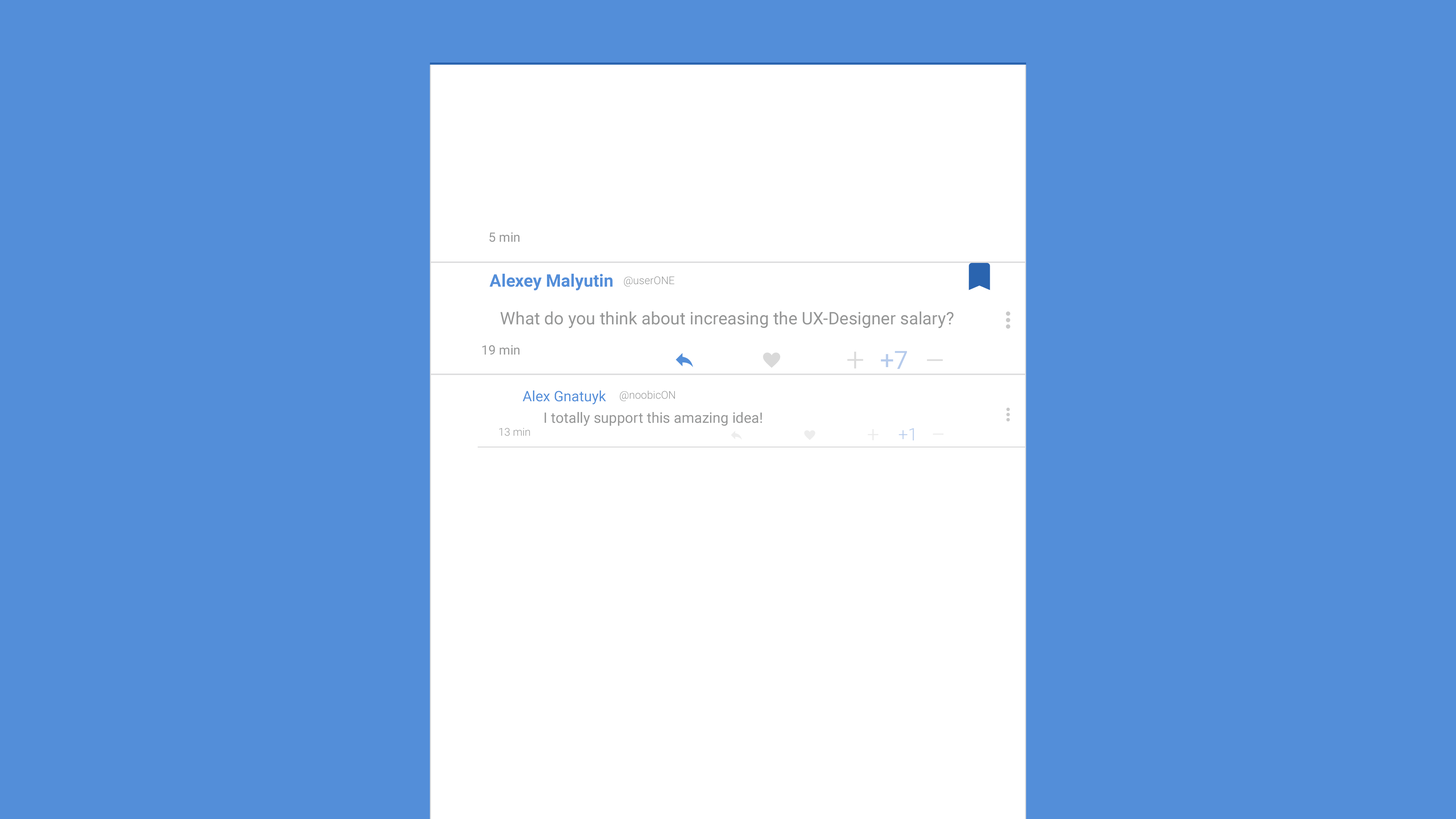
<style>
.page{position:relative;width:1456px;height:819px;background:#538ed9}
.page>*{position:absolute;margin:0}
.t1{font:12.9px "Roboto-Regular";color:#959696}
.t2{font:17.2px "Roboto-Bold";color:#538ed9}
.t3{font:10.8px "Roboto-Light";color:#959696}
.t4{font:17.2px "Roboto-Regular";color:#959696}
.t5{font:32.3px "Roboto-Light";color:#dbdbdb}
.t6{font:25.1px "Roboto-Regular";color:#b6cbec}
.t7{font:14.4px "Roboto-Regular";color:#538ed9}
.t8{font:14.4px "Roboto-Regular";color:#959696}
.t9{font:21.6px "Roboto-Light";color:#ebebeb}
.t10{font:17.2px "Roboto-Light";color:#b6cbec}
</style>
<div class="page">
<p class="t1" style="left:489px;top:232px;width:31px;height:10px">5 min</p>
<p class="t2" style="left:490px;top:274px;width:123px;height:17px">Alexey Malyutin</p>
<p class="t3" style="left:624px;top:276px;width:51px;height:11px">@userONE</p>
<p class="t4" style="left:500px;top:311px;width:454px;height:17px">What do you think about increasing the UX-Designer salary?</p>
<p class="t1" style="left:482px;top:345px;width:38px;height:10px">19 min</p>
<p class="t5" style="left:847px;top:352px;width:16px;height:17px">+</p>
<p class="t6" style="left:881px;top:351px;width:26px;height:18px">+7</p>
<p class="t5" style="left:927px;top:359px;width:16px;height:2px">–</p>
<p class="t7" style="left:523px;top:390px;width:83px;height:14px">Alex Gnatuyk</p>
<p class="t3" style="left:620px;top:390px;width:55px;height:11px">@noobicON</p>
<p class="t8" style="left:545px;top:412px;width:217px;height:14px">I totally support this amazing idea!</p>
<p class="t3" style="left:499px;top:428px;width:31px;height:8px">13 min</p>
<p class="t9" style="left:868px;top:429px;width:11px;height:11px">+</p>
<p class="t10" style="left:899px;top:428px;width:15px;height:12px">+1</p>
</div>
